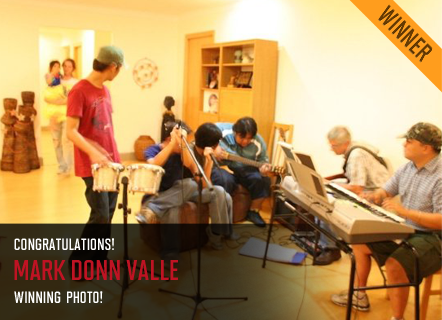
<style>
.page{position:relative;width:442px;height:320px}
.page>*{position:absolute;margin:0}
.t1{font:16.4px "Maybe-Bold";color:#ffffff}
.t2{font:28.6px "Maybe-Bold";color:#bf1323}
</style>
<div class="page">
<p class="t1" style="left:14px;top:238px;width:100px;height:12px">CONGRATULATIONS!</p>
<p class="t2" style="left:14px;top:260px;width:164px;height:20px">mark donn valle</p>
<p class="t1" style="left:14px;top:291px;width:89px;height:12px">winning  photo!</p>
</div>
